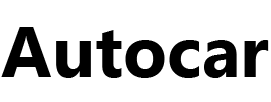
<style>
.page{position:relative;width:271px;height:102px;background:#ffffff}
.page>*{position:absolute;margin:0}
.t1{font:72px "SegoeUI-Bold";color:#000000}
</style>
<div class="page">
<p class="t1" style="left:1px;top:27px;width:268px;height:51px">Autocar</p>
</div>
